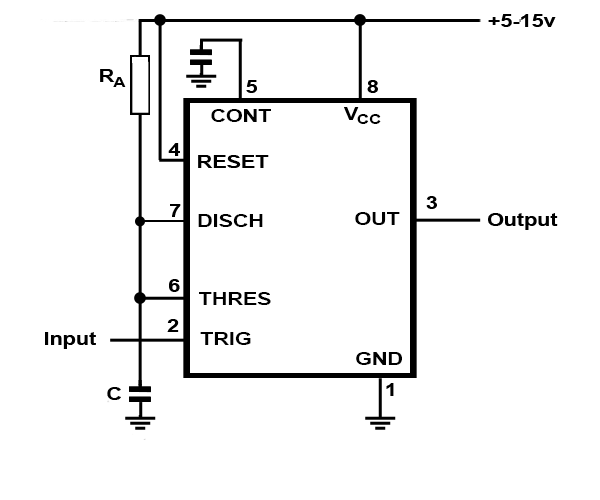
<style>
.page{position:relative;width:600px;height:500px;background:#ffffff}
.page>*{position:absolute;margin:0}
.t1{font:17.9px "Arial-BoldMT";color:#000000;scale:1.2 1}
.t2{font:13.9px "Arial-BoldMT";color:#000000;scale:1.2 1}
</style>
<div class="page">
<p class="t1" style="left:488px;top:14px;width:68px;height:13px">+5-15v</p>
<p class="t1" style="left:100px;top:69px;width:15px;height:13px">R</p>
<p class="t2" style="left:113px;top:77px;width:13px;height:10px">A</p>
<p class="t1" style="left:246px;top:80px;width:11px;height:13px">5</p>
<p class="t1" style="left:211px;top:109px;width:60px;height:13px">CONT</p>
<p class="t2" style="left:357px;top:114px;width:24px;height:10px">CC</p>
<p class="t1" style="left:168px;top:143px;width:12px;height:13px">4</p>
<p class="t1" style="left:426px;top:196px;width:11px;height:13px">3</p>
<p class="t1" style="left:170px;top:204px;width:11px;height:13px">7</p>
<p class="t1" style="left:198px;top:214px;width:65px;height:13px">DISCH</p>
<p class="t1" style="left:355px;top:212px;width:45px;height:13px">OUT</p>
<p class="t1" style="left:488px;top:213px;width:70px;height:17px">Output</p>
<p class="t1" style="left:169px;top:279px;width:11px;height:13px">6</p>
<p class="t1" style="left:199px;top:292px;width:72px;height:13px">THRES</p>
<p class="t1" style="left:167px;top:319px;width:12px;height:13px">2</p>
<p class="t1" style="left:45px;top:332px;width:51px;height:17px">Input</p>
<p class="t1" style="left:200px;top:332px;width:51px;height:13px">TRIG</p>
<p class="t1" style="left:356px;top:352px;width:46px;height:13px">GND</p>
<p class="t1" style="left:386px;top:383px;width:8px;height:13px">1</p>
</div>
